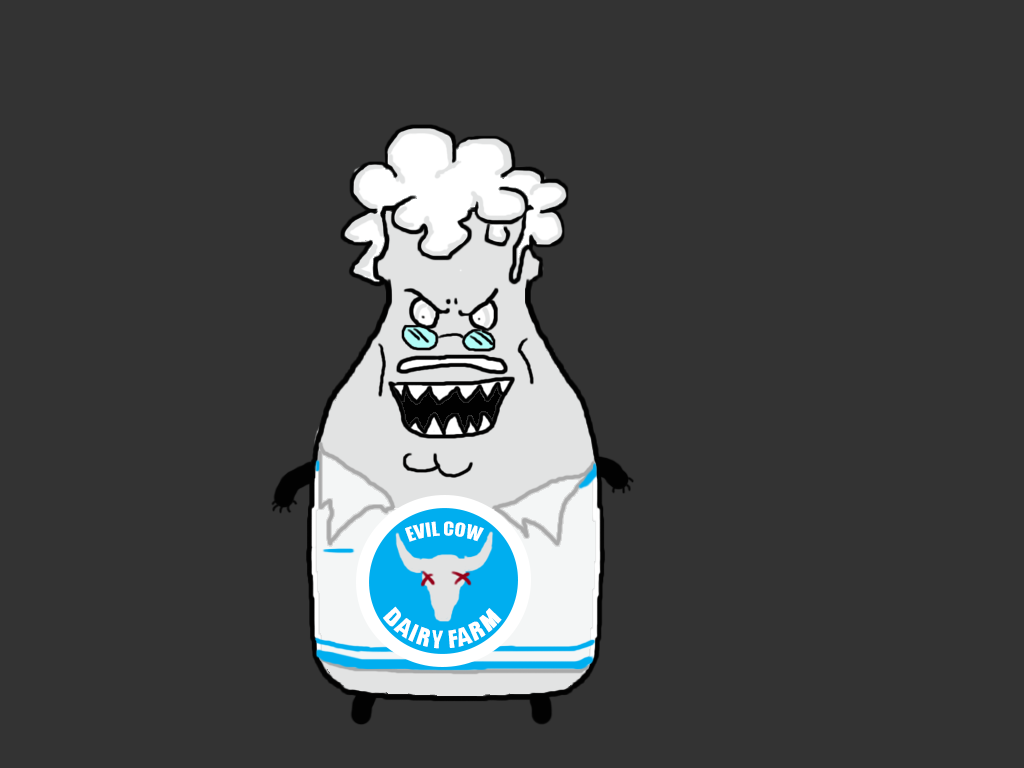
<style>
.page{position:relative;width:1024px;height:768px;background:#333333}
.page>*{position:absolute;margin:0}
.t1{font:18px "Impact";color:#ffffff}
.t2{font:21.7px/16.3px "Impact";color:#ffffff;scale:0.92 1}
</style>
<div class="page">
<p class="t1" style="left:405px;top:521px;width:79px;height:21px">EVIL COW</p>
<p class="t2" style="left:383px;top:606px;width:119px;height:43px">DAIRY FARM</p>
</div>
